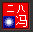
<style>
.page{position:relative;width:33px;height:32px;background:#f20000}
.page>*{position:absolute;margin:0}
.t1{font:10.4px "SimSun";color:#ffffff}
.t2{font:11.7px "SimSun";color:#ffffff}
</style>
<div class="page">
<p class="t1" style="left:7px;top:5px;width:18px;height:8px">二八</p>
<p class="t2" style="left:16px;top:15px;width:11px;height:12px">冯</p>
</div>
